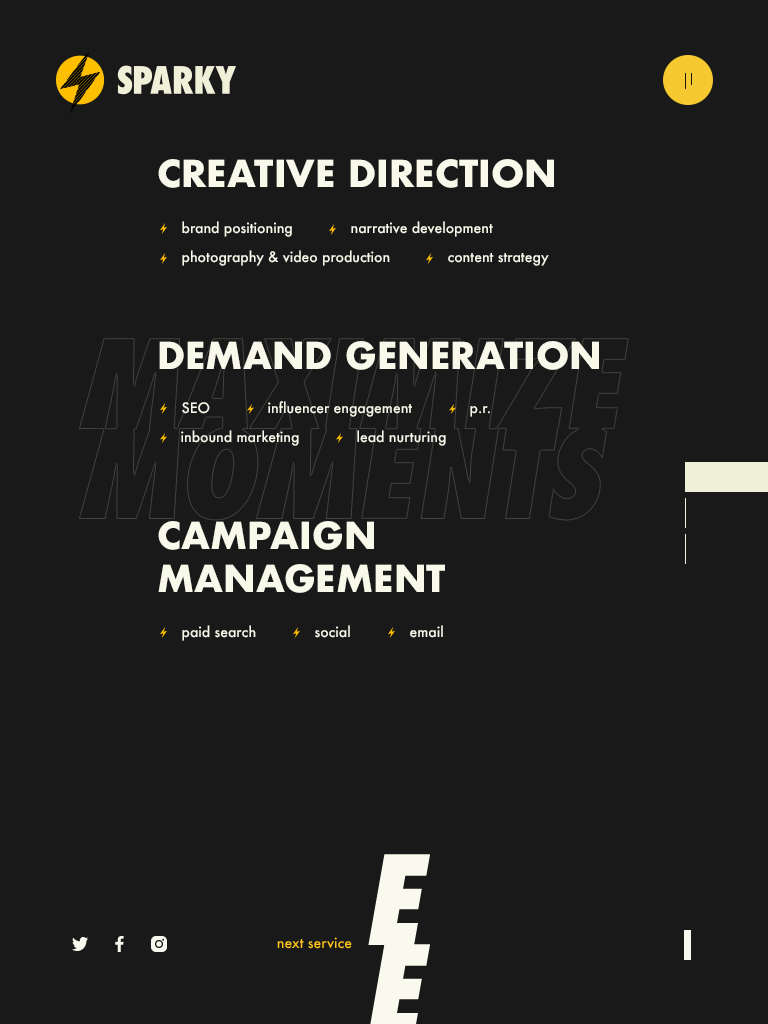
<style>
.page{position:relative;width:768px;height:1024px;background:#191919}
.page>*{position:absolute;margin:0}
.t1{font:36px "Futura-Bold";color:#f8f8eb}
.t2{font:14px "Futura-Medium";color:#f8f8eb}
.t3{font:14px "Futura-Medium";color:#fdc519}
</style>
<div class="page">
<p class="t1" style="left:158px;top:159px;width:396px;height:29px">CREATIVE DIRECTION</p>
<p class="t2" style="left:182px;top:221px;width:110px;height:16px">brand positioning</p>
<p class="t2" style="left:351px;top:221px;width:142px;height:16px">narrative development</p>
<p class="t2" style="left:182px;top:250px;width:208px;height:16px">photography &amp; video production</p>
<p class="t2" style="left:448px;top:253px;width:101px;height:13px">content strategy</p>
<p class="t1" style="left:159px;top:341px;width:440px;height:29px">DEMAND GENERATION</p>
<p class="t2" style="left:268px;top:401px;width:144px;height:16px">influencer engagement</p>
<p class="t2" style="left:182px;top:402px;width:28px;height:12px">SEO</p>
<p class="t2" style="left:470px;top:406px;width:20px;height:11px">p.r.</p>
<p class="t2" style="left:181px;top:430px;width:118px;height:16px">inbound marketing</p>
<p class="t2" style="left:357px;top:430px;width:89px;height:16px">lead nurturing</p>
<p class="t1" style="left:158px;top:521px;width:287px;height:72px">CAMPAIGN MANAGEMENT</p>
<p class="t2" style="left:182px;top:625px;width:74px;height:16px">paid search</p>
<p class="t2" style="left:315px;top:625px;width:35px;height:13px">social</p>
<p class="t2" style="left:410px;top:625px;width:33px;height:13px">email</p>
<p class="t3" style="left:277px;top:937px;width:75px;height:12px">next service</p>
</div>
